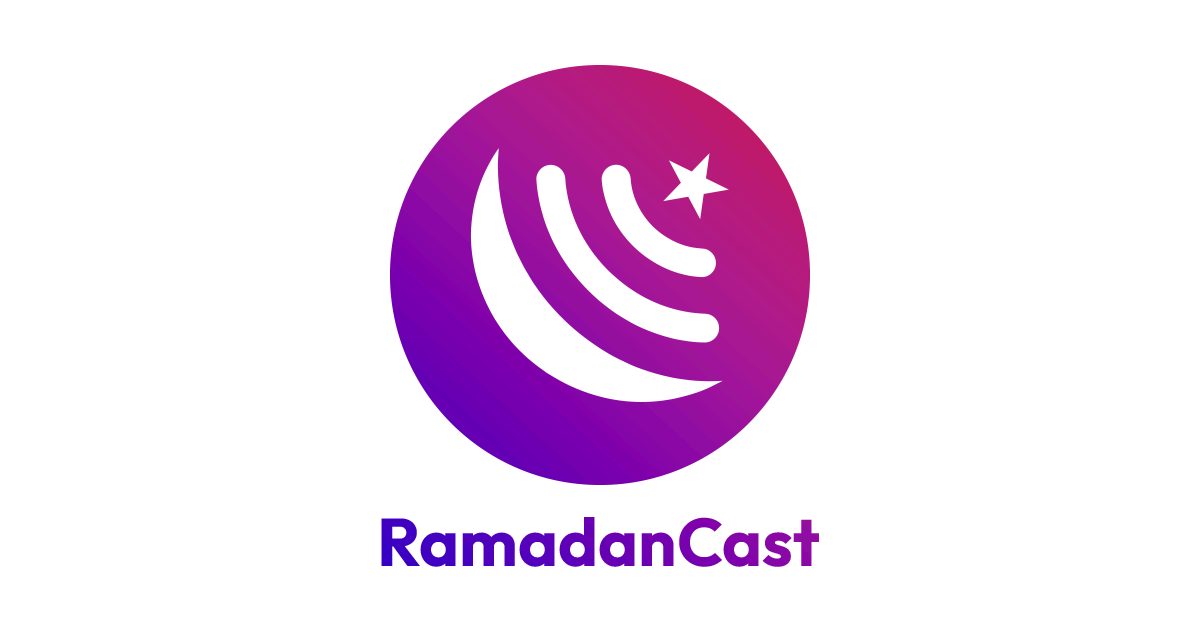
<style>
.page{position:relative;width:1200px;height:630px;background:#ffffff}
.page>*{position:absolute;margin:0}
.t1{font:67.3px "Outfit-Bold"}
</style>
<div class="page">
<p class="t1" style="left:381px;top:517px;width:438px;height:50px">RamadanCast</p>
</div>
